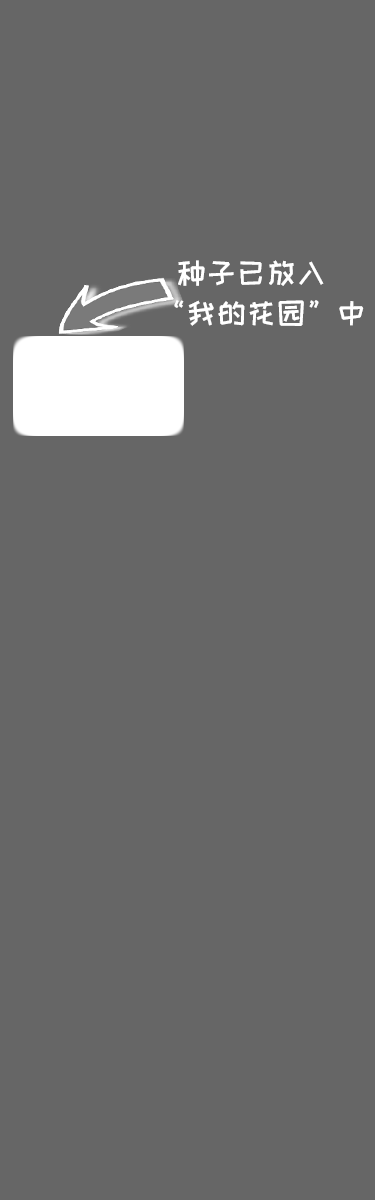
<style>
.page{position:relative;width:375px;height:1200px;background:#666666}
.page>*{position:absolute;margin:0}
.t1{font:30px "HappyZcool-2016";color:#ffffff}
</style>
<div class="page">
<p class="t1" style="left:178px;top:260px;width:146px;height:26px">种子已放入</p>
<p class="t1" style="left:174px;top:300px;width:190px;height:26px">“我的花园”中</p>
</div>
